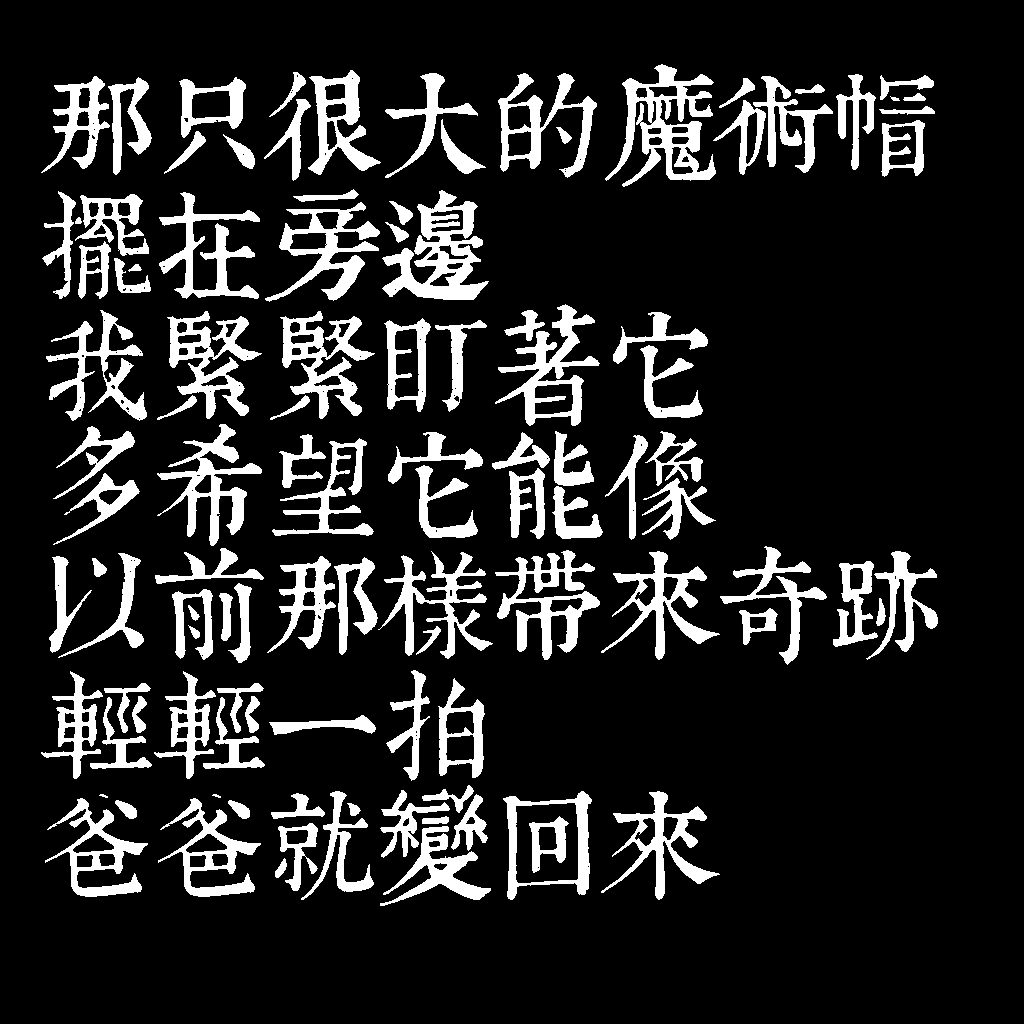
<style>
.page{position:relative;width:1024px;height:1024px;background:#000000}
.page>*{position:absolute;margin:0}
.t1{font:115px/120px "TpldKhangXiDictTrial";letter-spacing:-0.02em;color:#ffffff}
</style>
<div class="page">
<p class="t1" style="left:41px;top:64px;width:897px;height:842px">那只很大的魔術帽<br>擺在旁邊<br>我緊緊盯著它<br>多希望它能像<br>以前那樣帶來奇跡<br>輕輕一拍<br>爸爸就變回來</p>
</div>
